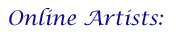
<style>
.page{position:relative;width:188px;height:49px;background:#ffffff}
.page>*{position:absolute;margin:0}
.t1{font:20px "LucidaCalligraphy-Italic";color:#140b89}
</style>
<div class="page">
<p class="t1" style="left:9px;top:8px;width:155px;height:18px">Online Artists:</p>
</div>
